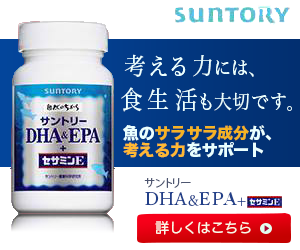
<style>
.page{position:relative;width:300px;height:250px;background:#ffffff}
.page>*{position:absolute;margin:0}
.t1{font:24px "HiraMinProN-W3";letter-spacing:-0.015em;color:#e9ffff;scale:0.9 1}
.t2{font:19.6px "HiraMinProN-W3";letter-spacing:-0.015em;color:#e9ffff;scale:0.9 1}
.t3{font:25px "HiraMinProN-W3";letter-spacing:-0.015em;color:#e9ffff;scale:0.9 1}
.t4{font:16px "HiraKakuStd-W8";letter-spacing:-0.015em;color:#f5b324}
.t5{font:16px "HiraKakuStd-W8";letter-spacing:-0.015em;color:#e9ffff}
.t6{font:16px "HiraKakuStd-W8";letter-spacing:-0.015em;color:#ffb933}
.t7{font:11px "KozGoPr6N-Regular";letter-spacing:-0.015em;color:#4e5670}
.t8{font:18px "YuMin_36pKn-Medium";letter-spacing:-0.015em;color:#224089}
.t9{font:14px "YuMin_36pKn-Medium";letter-spacing:-0.015em;color:#224089}
.t10{font:14px "HiraMaruProN-W4";letter-spacing:-0.015em;color:#f9f7e7}
</style>
<div class="page">
<p class="t1" style="left:124px;top:54px;width:130px;height:23px">考える力<span class="t2">には、</span></p>
<p class="t2" style="left:121px;top:87px;width:171px;height:25px"><span class="t3">食生活</span>も大切です。</p>
<p class="t4" style="left:123px;top:125px;width:149px;height:33px"><span class="t5">魚の</span>サラサラ成分<span class="t5">が、<br></span><span class="t6">考える力</span><span class="t5">をサポート</span></p>
<p class="t7" style="left:144px;top:178px;width:47px;height:10px">サントリー</p>
<p class="t8" style="left:145px;top:192px;width:101px;height:14px">DHA<span class="t9">&amp;</span>EPA<span class="t9">+</span></p>
<p class="t10" style="left:155px;top:221px;width:96px;height:14px">詳しくはこちら</p>
</div>
